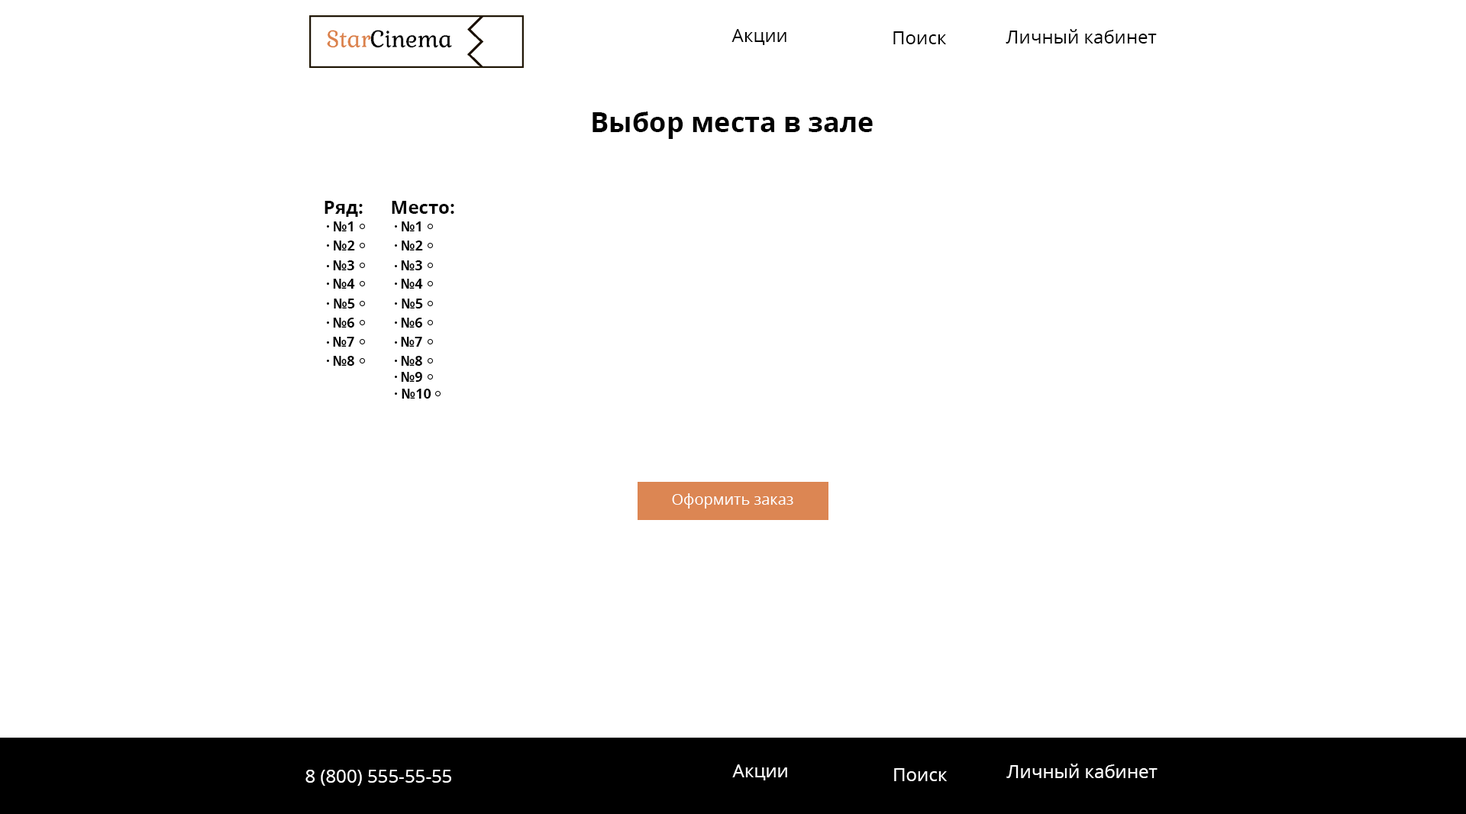
<style>
.page{position:relative;width:1466px;height:814px;background:#ffffff}
.page>*{position:absolute;margin:0}
.t1{font:18.3px "OpenSans-Regular";color:#000000}
.t2{font:27.5px "OpenSans-Bold";color:#000000}
.t3{font:18.3px "OpenSans-Bold";color:#000000}
.t4{font:13.7px "OpenSans-Bold";color:#000000}
.t5{font:15.3px "OpenSans-Regular";color:#ffffff}
.t6{font:18.3px "OpenSans-Regular";color:#ffffff}
</style>
<div class="page">
<p class="t1" style="left:731px;top:29px;width:55px;height:16px">Акции</p>
<p class="t1" style="left:1005px;top:29px;width:151px;height:15px">Личный кабинет</p>
<p class="t1" style="left:893px;top:31px;width:53px;height:13px">Поиск</p>
<p class="t2" style="left:592px;top:111px;width:280px;height:28px">Выбор места в зале</p>
<p class="t3" style="left:324px;top:201px;width:39px;height:16px">Ряд:</p>
<p class="t3" style="left:392px;top:201px;width:62px;height:13px">Место:</p>
<p class="t4" style="left:334px;top:221px;width:19px;height:10px">№1</p>
<p class="t4" style="left:401px;top:221px;width:20px;height:10px">№1</p>
<p class="t4" style="left:334px;top:240px;width:21px;height:10px">№2</p>
<p class="t4" style="left:401px;top:240px;width:22px;height:10px">№2</p>
<p class="t4" style="left:333px;top:260px;width:21px;height:10px">№3</p>
<p class="t4" style="left:401px;top:260px;width:21px;height:10px">№3</p>
<p class="t4" style="left:333px;top:279px;width:22px;height:10px">№4</p>
<p class="t4" style="left:401px;top:279px;width:22px;height:10px">№4</p>
<p class="t4" style="left:334px;top:298px;width:21px;height:10px">№5</p>
<p class="t4" style="left:401px;top:298px;width:22px;height:10px">№5</p>
<p class="t4" style="left:333px;top:318px;width:21px;height:9px">№6</p>
<p class="t4" style="left:401px;top:318px;width:21px;height:9px">№6</p>
<p class="t4" style="left:333px;top:337px;width:21px;height:10px">№7</p>
<p class="t4" style="left:401px;top:337px;width:21px;height:10px">№7</p>
<p class="t4" style="left:333px;top:356px;width:21px;height:10px">№8</p>
<p class="t4" style="left:401px;top:356px;width:21px;height:10px">№8</p>
<p class="t4" style="left:401px;top:372px;width:21px;height:10px">№9</p>
<p class="t4" style="left:401px;top:389px;width:30px;height:9px">№10</p>
<p class="t5" style="left:672px;top:493px;width:121px;height:15px">Оформить заказ</p>
<p class="t6" style="left:305px;top:769px;width:146px;height:16px">8 (800) 555-55-55</p>
<p class="t6" style="left:732px;top:764px;width:55px;height:16px">Акции</p>
<p class="t6" style="left:894px;top:768px;width:52px;height:13px">Поиск</p>
<p class="t6" style="left:1006px;top:763px;width:151px;height:15px">Личный кабинет</p>
</div>
